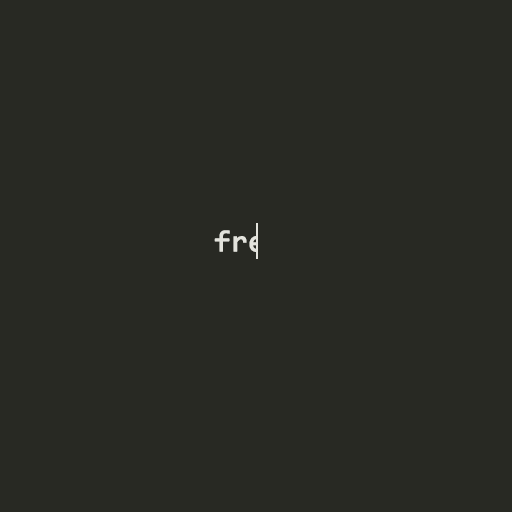
<style>
.page{position:relative;width:512px;height:512px;background:#282923}
.page>*{position:absolute;margin:0}
.t1{font:29.6px "Consolas";font-weight:bold}
</style>
<div class="page">
<p class="t1" style="left:214px;top:230px;width:118px;height:22px">frename</p>
</div>
